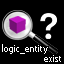
<style>
.page{position:relative;width:64px;height:64px;background:#000000}
.page>*{position:absolute;margin:0}
.t1{font:9px "Tahoma";color:#ffffff}
</style>
<div class="page">
<p class="t1" style="left:2px;top:44px;width:59px;height:18px">logic_entity<br>              exist</p>
</div>
